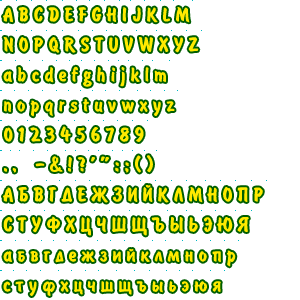
<style>
.page{position:relative;width:300px;height:300px;background:#ffffff}
.page>*{position:absolute;margin:0}
.t1{font:22px/30px "BrushType-Bold";letter-spacing:0.25em;color:#ffea00}
.t2{font:22px/30px "BrushType-Bold";letter-spacing:0.265em;color:#ffea00}
.t3{font:22px/30px "BrushType-Bold";letter-spacing:0.27em;color:#ffea00}
.t4{font:22px/30px "BrushType-Bold";letter-spacing:0.24em;color:#ffea00}
.t5{font:22px/30px "BrushType-Bold";letter-spacing:0.26em;color:#ffea00}
.t6{font:22px/30px "BrushType-Bold";letter-spacing:0.28em;color:#ffea00}
.t7{font:22px/30px "BrushType-Bold";letter-spacing:0.23em;color:#ffea00}
.t8{font:22px/30px "BrushType-Bold";letter-spacing:0.255em;color:#ffea00}
.t9{font:22px/30px "BrushType-Bold";letter-spacing:0.245em;color:#ffea00}
.t10{font:22px/30px "BrushType-Bold";letter-spacing:0.285em;color:#ffea00}
.t11{font:22px/30px "BrushType-Bold";letter-spacing:0.215em;color:#ffea00}
.t12{font:22px/30px "BrushType-Bold";letter-spacing:0.22em;color:#ffea00}
.t13{font:22px/30px "BrushType-Bold";letter-spacing:0.29em;color:#ffea00}
.t14{font:22px/30px "BrushType-Bold";letter-spacing:0.275em;color:#ffea00}
.t15{font:22px/30px "BrushType-Bold";letter-spacing:0.205em;color:#ffea00}
.t16{font:22px/30px "BrushType-Bold";letter-spacing:0.235em;color:#ffea00}
.t17{font:22px/30px "BrushType-Bold";letter-spacing:0.225em;color:#ffea00}
</style>
<div class="page">
<p class="t1" style="left:3px;top:7px;width:260px;height:289px"><span class="t2">A</span>B<span class="t3">C</span><span class="t4">D</span><span class="t5">E</span>F<span class="t4">GH</span><span class="t6">I</span><span class="t7">J</span>K<span class="t3">L</span>M<br><span class="t7">NO</span><span class="t2">P</span><span class="t5">Q</span><span class="t6">R</span>STU<span class="t2">VW</span><span class="t5">X</span>YZ<br>a<span class="t3">b</span>c<span class="t4">de</span><span class="t3">f</span><span class="t4">g</span><span class="t5">h</span>i<span class="t4">j</span>k<span class="t8">l</span>m<br>n<span class="t9">o</span><span class="t5">p</span>q<span class="t10">r</span><span class="t5">s</span><span class="t2">t</span><span class="t4">u</span><span class="t3">v</span><span class="t2">w</span><span class="t8">x</span><span class="t2">y</span>z<br><span class="t9">0</span><span class="t5">1</span><span class="t3">2</span><span class="t7">3</span><span class="t6">4</span><span class="t9">5</span><span class="t6">6</span><span class="t7">7</span>89<br><span class="t11">.</span>, -&amp;!<span class="t12">?</span><span class="t11">’</span><span class="t4">”</span>:;<span class="t6">(</span>)<br><span class="t3">ÀÁ</span>Â<span class="t13">Ã</span><span class="t5">Ä</span>Å<span class="t14">Æ</span><span class="t7">Ç</span><span class="t15">È</span><span class="t12">É</span><span class="t13">Ê</span>Ë<span class="t16">Ì</span><span class="t7">Í</span><span class="t9">Î</span><span class="t4">Ï</span>Ð<br><span class="t4">Ñ</span><span class="t2">Ò</span><span class="t3">Ó</span>Ô<span class="t4">Õ</span><span class="t3">Ö</span><span class="t12">×Ø</span><span class="t5">Ù</span>Ú<span class="t12">Û</span><span class="t3">Ü</span><span class="t7">Ý</span><span class="t8">Þ</span>ß<br><span class="t5">à</span>á<span class="t4">â</span><span class="t6">ã</span><span class="t9">ä</span><span class="t16">å</span><span class="t5">æ</span><span class="t17">ç</span><span class="t12">è</span><span class="t16">é</span>ê<span class="t4">ëì</span>í<span class="t3">î</span>ïð<br><span class="t4">ñ</span><span class="t5">ò</span><span class="t3">ó</span>ô<span class="t4">õ</span><span class="t7">ö</span><span class="t12">÷</span><span class="t7">ø</span><span class="t3">ù</span><span class="t5">ú</span>ûüý<span class="t8">þ</span>ÿ</p>
</div>
